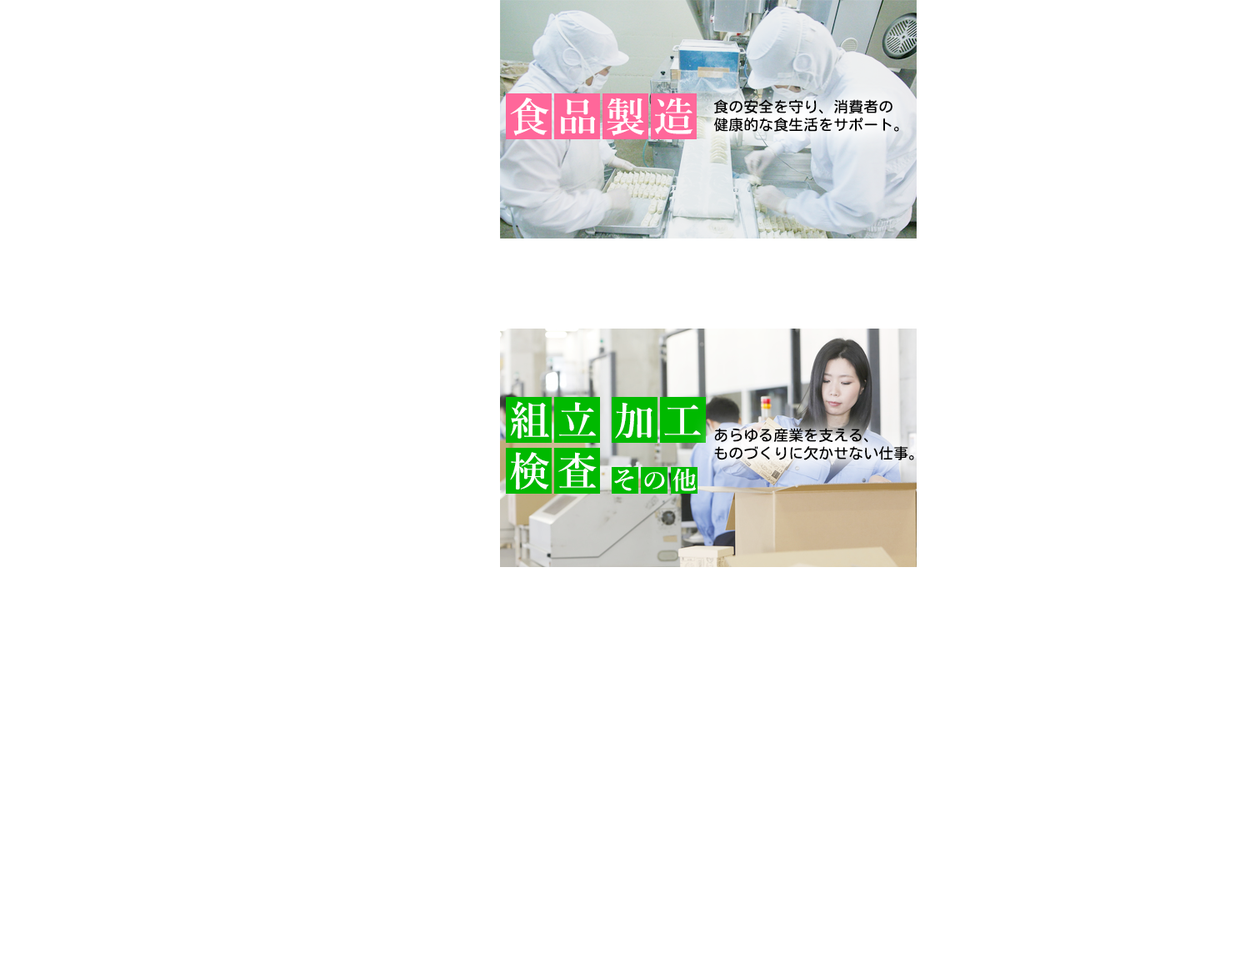
<style>
.page{position:relative;width:1250px;height:954px;background:#ffffff}
.page>*{position:absolute;margin:0}
.t1{font:40px "YuMincho-Demibold";letter-spacing:0.2em;color:#ffffff}
.t2{font:15px "MotoyaLMaru-W3-90ms-RKSJ-H";color:#000000}
.t3{font:25px "YuMincho-Demibold";letter-spacing:0.2em;color:#ffffff}
</style>
<div class="page">
<p class="t1" style="left:510px;top:98px;width:184px;height:38px">食品製造</p>
<p class="t2" style="left:714px;top:99px;width:185px;height:33px">食の安全を守り、消費者の<br>健康的な食生活をサポート。</p>
<p class="t1" style="left:510px;top:401px;width:86px;height:37px">組立</p>
<p class="t1" style="left:615px;top:403px;width:86px;height:35px">加工</p>
<p class="t2" style="left:714px;top:428px;width:200px;height:32px">あらゆる産業を支える、<br>ものづくりに欠かせない仕事。</p>
<p class="t1" style="left:510px;top:452px;width:87px;height:37px">検査</p>
<p class="t3" style="left:614px;top:468px;width:82px;height:24px">その他</p>
</div>
